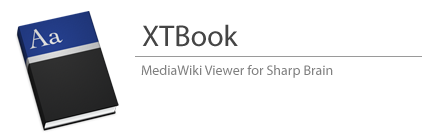
<style>
.page{position:relative;width:440px;height:140px;background:#ffffff}
.page>*{position:absolute;margin:0}
.t1{font:30px "MyriadPro-Regular";color:#454545}
.t2{font:14px "MyriadPro-Regular";color:#808080}
</style>
<div class="page">
<p class="t1" style="left:142px;top:24px;width:96px;height:23px">XTBook</p>
<p class="t2" style="left:141px;top:65px;width:192px;height:13px">MediaWiki Viewer for Sharp Brain</p>
</div>
